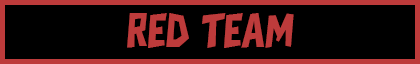
<style>
.page{position:relative;width:420px;height:64px;background:#000000}
.page>*{position:absolute;margin:0}
.t1{font:50px "CIKANDEI";color:#bd3b3b}
</style>
<div class="page">
<p class="t1" style="left:127px;top:13px;width:167px;height:35px">RED TEAM</p>
</div>
